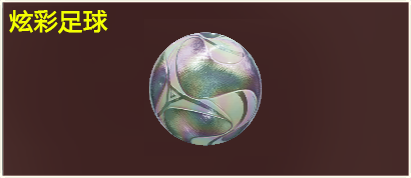
<style>
.page{position:relative;width:411px;height:178px}
.page>*{position:absolute;margin:0}
.t1{font:24px "MicrosoftYaHeiUI";color:#f4ff00;font-weight:bold}
</style>
<div class="page">
<p class="t1" style="left:9px;top:10px;width:99px;height:24px">炫彩足球</p>
</div>
